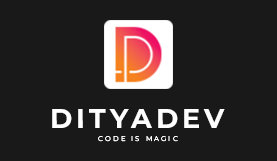
<style>
.page{position:relative;width:277px;height:161px;background:#191919}
.page>*{position:absolute;margin:0}
.t1{font:27.1px "Montserrat-Bold";letter-spacing:0.15em;color:#ffffff}
.t2{font:6.8px "Montserrat-Regular";letter-spacing:0.3em;color:#ffffff}
</style>
<div class="page">
<p class="t1" style="left:52px;top:109px;width:173px;height:19px">DITYADEV</p>
<p class="t2" style="left:98px;top:136px;width:80px;height:6px">CODE IS MAGIC</p>
</div>
